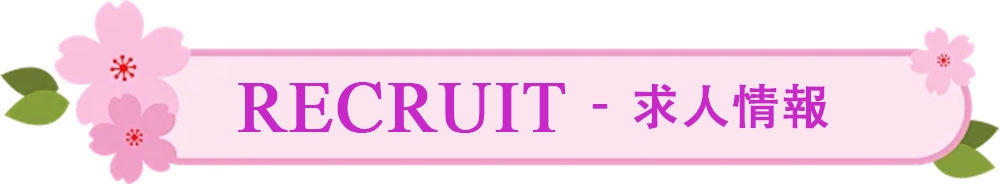
<style>
.page{position:relative;width:1000px;height:184px;background:#ffffff}
.page>*{position:absolute;margin:0}
.t1{font:72px "TimesNewRomanPSMT";letter-spacing:0.02em;color:#c928c8;text-transform:uppercase;font-weight:bold}
.t2{font:48px "AdobeHeitiStd-Regular";letter-spacing:0.02em;color:#c928c8;text-transform:uppercase;font-weight:bold}
</style>
<div class="page">
<p class="t1" style="left:238px;top:82px;width:328px;height:51px">Recruit</p>
<p class="t2" style="left:634px;top:83px;width:195px;height:46px">求人情報</p>
<p class="t2" style="left:592px;top:104px;width:16px;height:5px">-</p>
</div>
